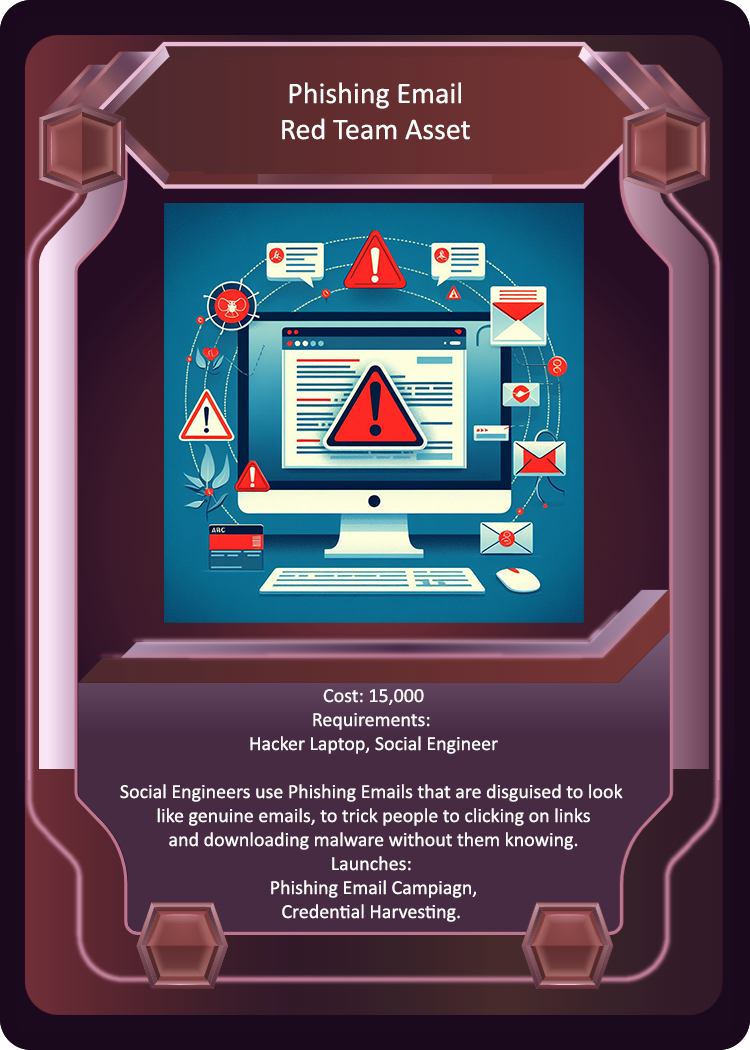
<style>
.page{position:relative;width:750px;height:1050px}
.page>*{position:absolute;margin:0}
.t1{font:30px "Calibri";color:#fcfbfb}
.t2{font:20px "Calibri";color:#fcfbfb}
</style>
<div class="page">
<p class="t1" style="left:282px;top:82px;width:188px;height:58px;text-align:center">Phishing Email<br>Red Team Asset</p>
<p class="t2" style="left:120px;top:689px;width:503px;height:233px;text-align:center">Cost: 15,000<br>Requirements: <br>Hacker Laptop, Social Engineer<br><br>Social Engineers use Phishing Emails that are disguised to look <br>like genuine emails, to trick people to clicking on links<br>and downloading malware without them knowing.<br>Launches: <br>Phishing Email Campiagn,<br>Credential Harvesting.</p>
</div>
